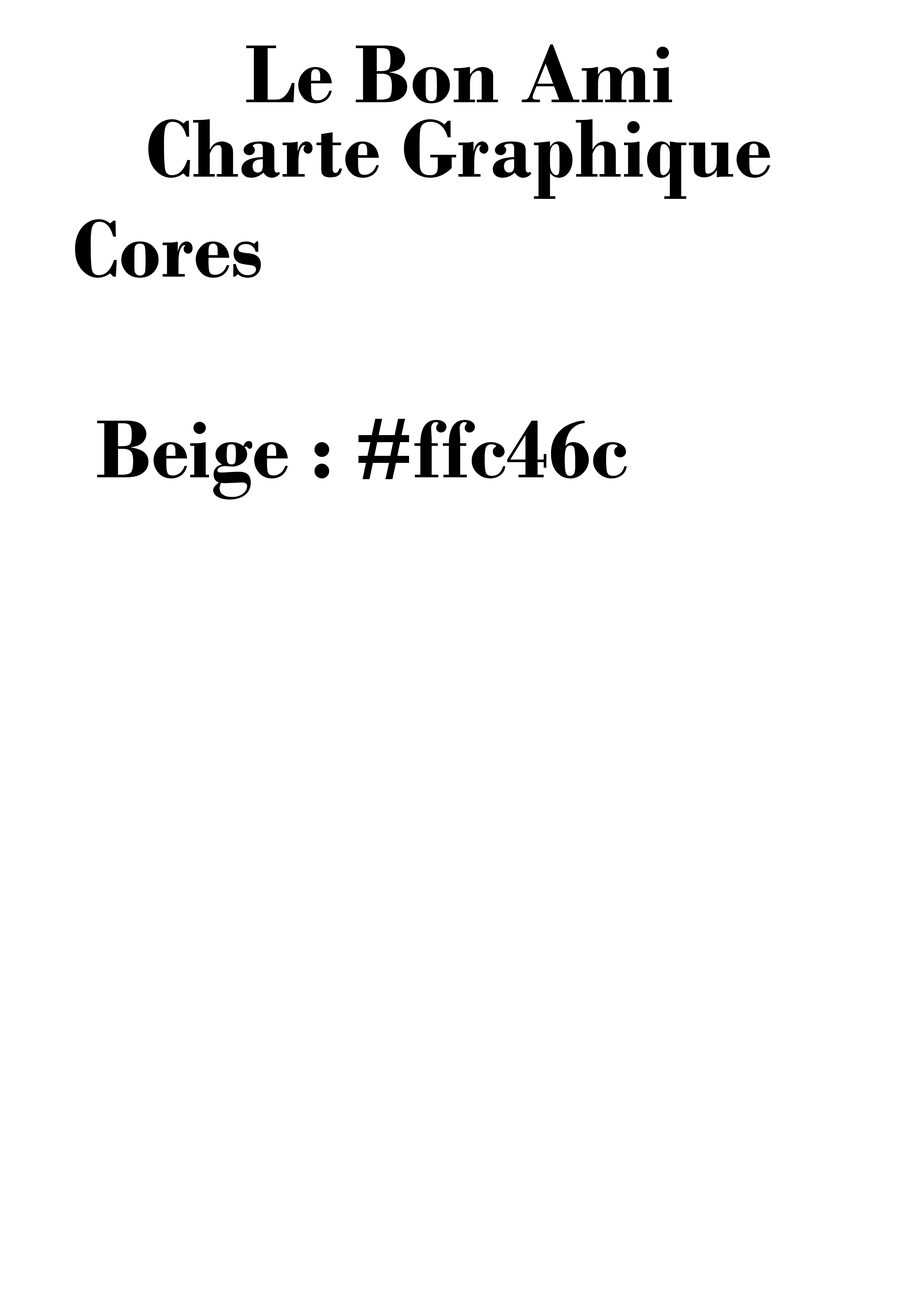
<style>
.page{position:relative;width:918px;height:1299px;background:#ffffff}
.page>*{position:absolute;margin:0}
.t1{font:86.4px "BodoniMT-Bold";color:#000000}
</style>
<div class="page">
<p class="t1" style="left:246px;top:44px;width:426px;height:59px">Le Bon Ami</p>
<p class="t1" style="left:148px;top:119px;width:622px;height:80px">Charte Graphique</p>
<p class="t1" style="left:75px;top:219px;width:186px;height:59px">Cores</p>
<p class="t1" style="left:97px;top:419px;width:530px;height:80px">Beige : #ffc46c</p>
</div>
